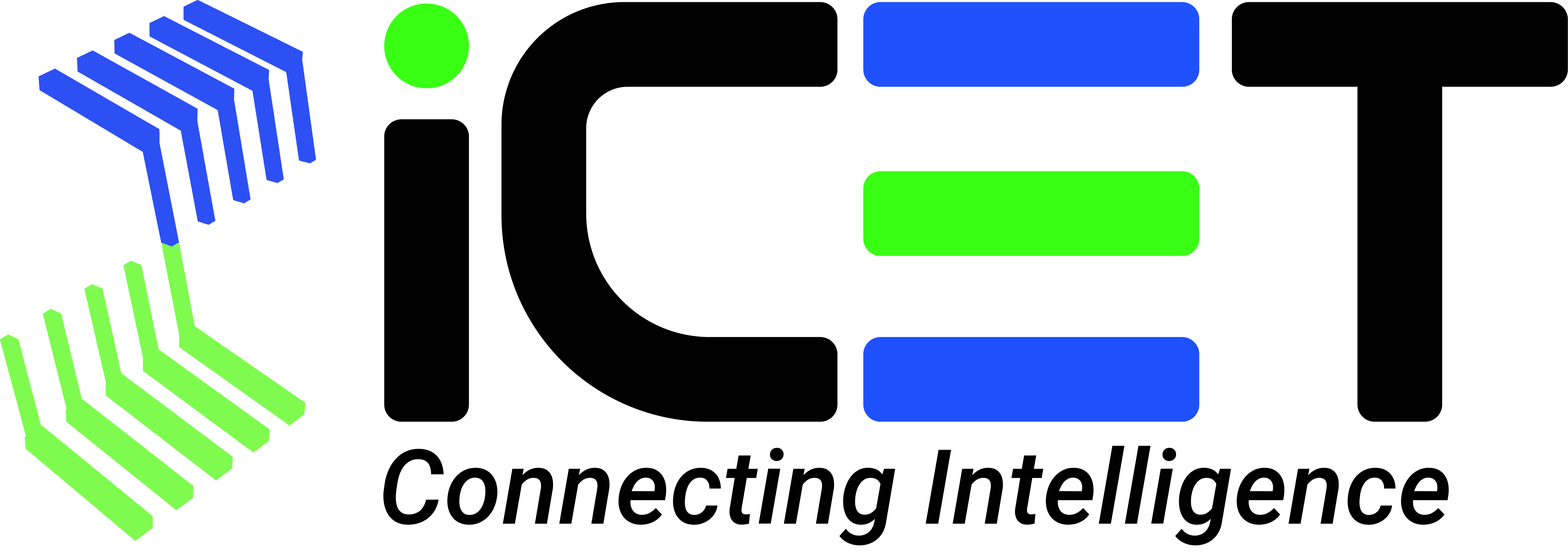
<style>
.page{position:relative;width:1568px;height:552px;background:#ffffff}
.page>*{position:absolute;margin:0}
.t1{font:103.9px "Roboto-MediumItalic";color:#000000}
</style>
<div class="page">
<p class="t1" style="left:383px;top:446px;width:1066px;height:100px">Connecting Intelligence</p>
</div>
